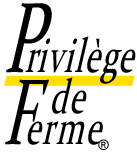
<style>
.page{position:relative;width:137px;height:153px;background:#ffffff}
.page>*{position:absolute;margin:0}
.t1{font:49.6px/39.3px "Constantia";letter-spacing:0.045em;color:#000000;scale:0.64 1}
.t2{font:102.9px/39.3px "Constantia";color:#000000;scale:0.64 1}
.t3{font:49.6px/39.3px "Constantia";color:#000000;scale:0.64 1}
.t4{font:49.6px/41.2px "Constantia";letter-spacing:0.045em;color:#000000;scale:0.64 1}
.t5{font:49.6px/41.2px "Constantia";letter-spacing:0.04em;color:#000000;scale:0.64 1}
.t6{font:96.6px/31.9px "Constantia";color:#000000;scale:0.64 1}
.t7{font:49.6px/31.9px "Constantia";letter-spacing:0.06em;color:#000000;scale:0.64 1}
.t8{font:14.3px "ArialMT";color:#000000}
</style>
<div class="page">
<p class="t1" style="left:5px;top:3px;width:131px;height:142px;text-align:center"><span class="t2">P</span><span class="t3">r</span>ivilè<span class="t4">ge<br>  </span><span class="t5">de<br></span><span class="t6">F</span><span class="t7">erme</span></p>
<p class="t8" style="left:98px;top:139px;width:11px;height:11px">®</p>
</div>
